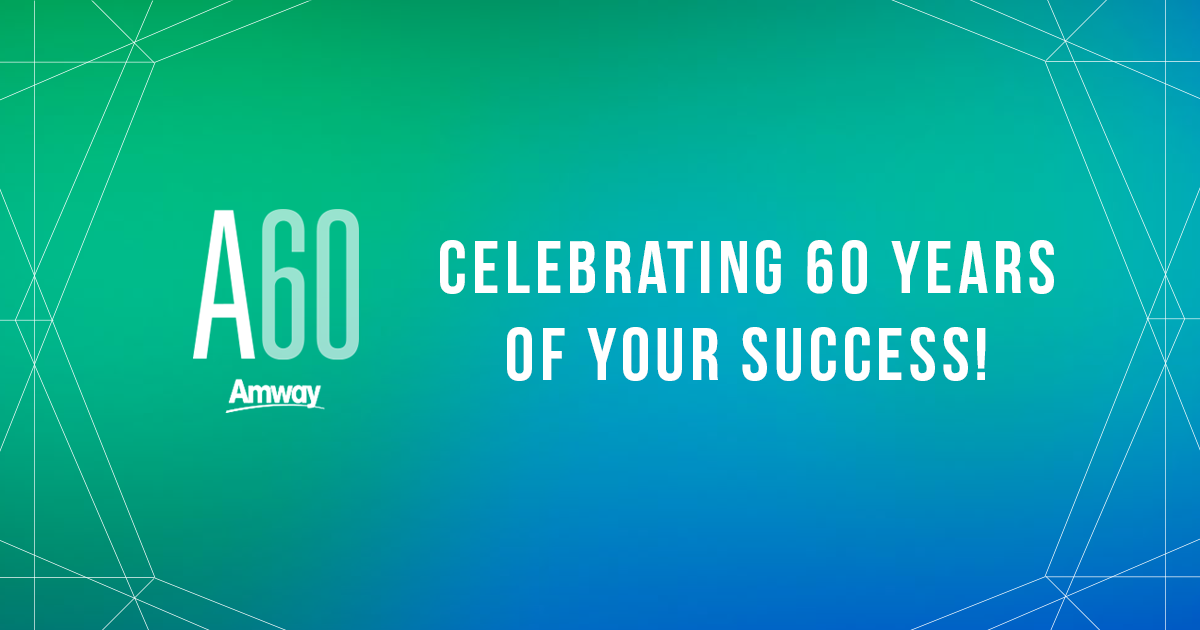
<style>
.page{position:relative;width:1200px;height:630px}
.page>*{position:absolute;margin:0}
.t1{font:74px/87px "BebasNeueBold";letter-spacing:0.07em;color:#ffffff;text-transform:uppercase}
</style>
<div class="page">
<p class="t1" style="left:440px;top:240px;width:614px;height:141px;text-align:center">Celebrating 60 Years <br>of Your Success!</p>
</div>
